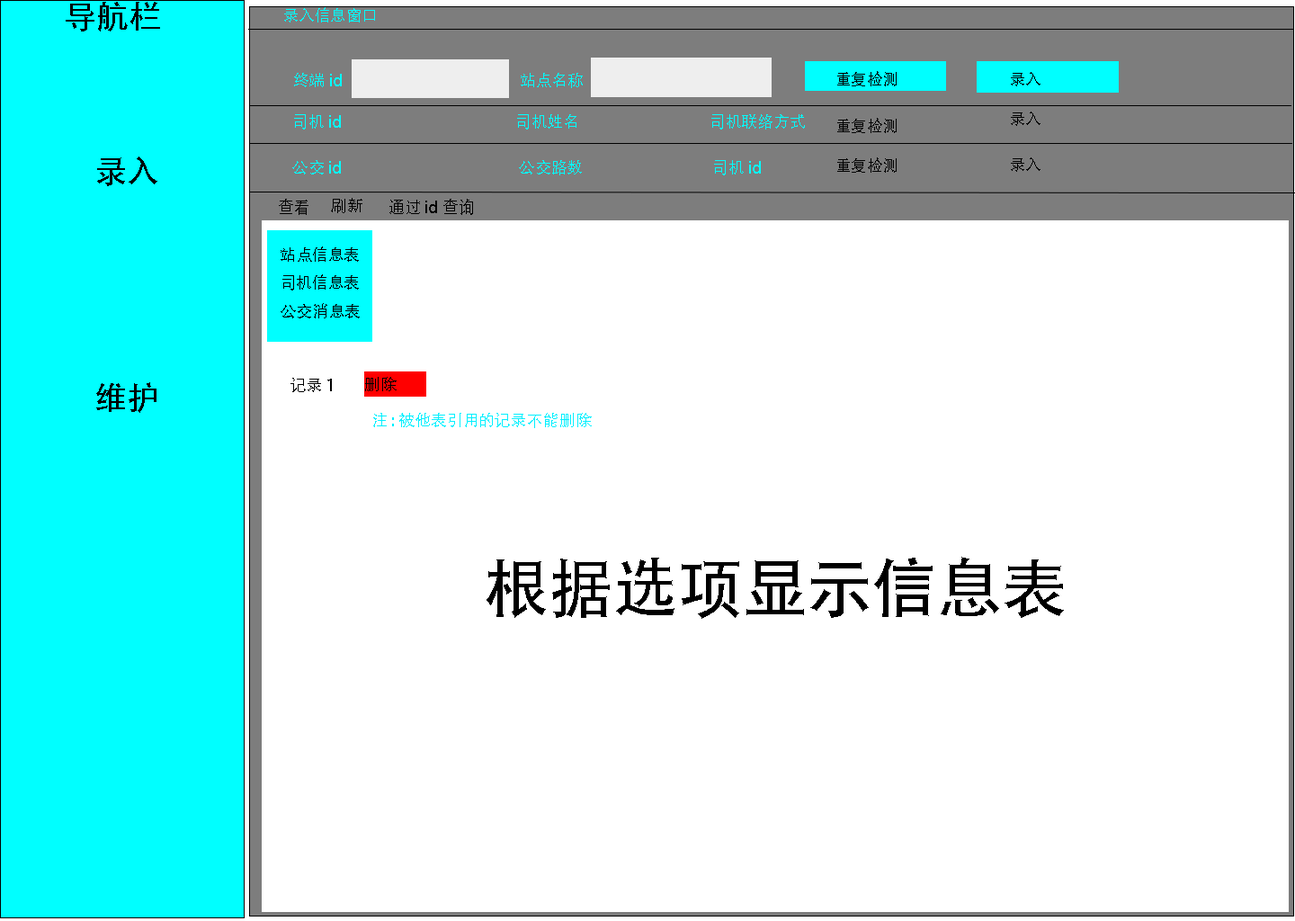
<style>
.page{position:relative;width:1295px;height:921px;background:#ffffff}
.page>*{position:absolute;margin:0}
.t1{font:32.4px "AdobeHeitiStd-Regular";color:#000000}
.t2{font:16.2px "AdobeHeitiStd-Regular";color:#00ffff}
.t3{font:16.2px "AdobeHeitiStd-Regular";color:#000000}
.t4{font:16.2px "AdobeHeitiStd-Regular";color:#010000}
.t5{font:16.2px "AdobeHeitiStd-Regular";color:#01f0ff}
.t6{font:64.7px "AdobeHeitiStd-Regular";color:#000000}
</style>
<div class="page">
<p class="t1" style="left:66px;top:2px;width:94px;height:29px">导航栏</p>
<p class="t2" style="left:284px;top:7px;width:91px;height:15px">录入信息窗口</p>
<p class="t2" style="left:294px;top:73px;width:289px;height:15px">终端id      站点名称</p>
<p class="t3" style="left:837px;top:71px;width:60px;height:15px">重复检测</p>
<p class="t3" style="left:1011px;top:72px;width:29px;height:14px">录入</p>
<p class="t3" style="left:1011px;top:112px;width:29px;height:14px">录入</p>
<p class="t2" style="left:294px;top:114px;width:511px;height:15px">司机id      司机姓名     司机联络方式</p>
<p class="t3" style="left:837px;top:118px;width:60px;height:15px">重复检测</p>
<p class="t1" style="left:96px;top:156px;width:61px;height:257px;text-align:center">录入<br><br><br><br>维护</p>
<p class="t2" style="left:292px;top:160px;width:469px;height:15px">公交id      公交路数     司机id</p>
<p class="t3" style="left:837px;top:157px;width:60px;height:16px">重复检测</p>
<p class="t3" style="left:1011px;top:157px;width:29px;height:15px">录入</p>
<p class="t3" style="left:331px;top:198px;width:31px;height:15px">刷新</p>
<p class="t3" style="left:279px;top:199px;width:29px;height:16px">查看</p>
<p class="t3" style="left:389px;top:199px;width:84px;height:16px">通过id查询</p>
<p class="t3" style="left:281px;top:246px;width:79px;height:72px;text-align:center">站点信息表<br>司机信息表<br>公交消息表</p>
<p class="t3" style="left:290px;top:378px;width:42px;height:14px">记录1</p>
<p class="t4" style="left:365px;top:377px;width:32px;height:14px">删除</p>
<p class="t5" style="left:373px;top:413px;width:219px;height:15px">注:被他表引用的记录不能删除</p>
<p class="t6" style="left:487px;top:557px;width:577px;height:62px">根据选项显示信息表</p>
</div>
